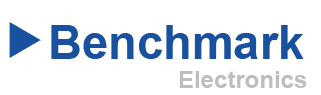
<style>
.page{position:relative;width:321px;height:95px;background:#ffffff}
.page>*{position:absolute;margin:0}
.t1{font:47px "Arial-BoldMT";color:#19519e}
.t2{font:24px "Arial-BoldMT";color:#bebebf}
</style>
<div class="page">
<p class="t1" style="left:51px;top:25px;width:253px;height:34px">Benchmark</p>
<p class="t2" style="left:179px;top:71px;width:128px;height:17px">Electronics</p>
</div>
